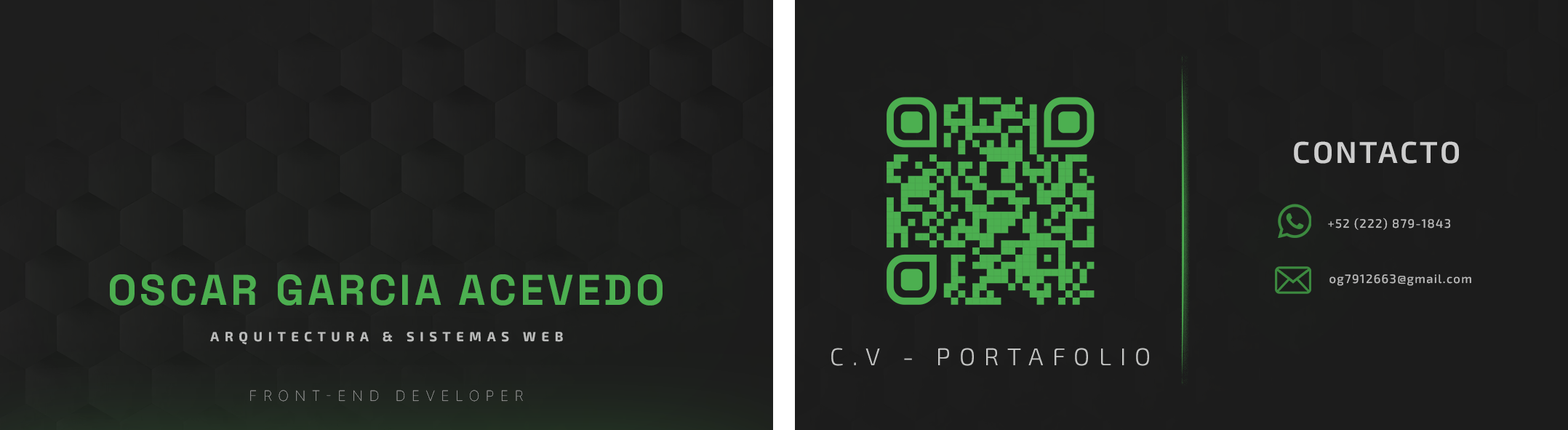
<style>
.page{position:relative;width:1568px;height:430px;background:#1c1c1c}
.page>*{position:absolute;margin:0}
.t1{font:30.3px "Exo2-SemiBold";letter-spacing:0.08em;color:#cdcdcd}
.t2{font:12.1px "Exo2-Medium";letter-spacing:0.08em;color:#bdbdbd}
.t3{font:42.9px "SpaceGrotesk-Bold";letter-spacing:0.08em;color:#4caf50}
.t4{font:13.3px "Exo2-Bold";letter-spacing:0.42em;color:#bdbdbd}
.t5{font:24.2px "Exo2-Light";letter-spacing:0.36em;color:#bcbdbc}
.t6{font:14.3px "Inter-Thin";letter-spacing:0.42em}
</style>
<div class="page">
<p class="t1" style="left:1294px;top:141px;width:165px;height:23px">CONTACTO</p>
<p class="t2" style="left:1328px;top:217px;width:123px;height:13px">+52 (222) 879-1843</p>
<p class="t3" style="left:110px;top:274px;width:553px;height:31px">OSCAR GARCIA ACEVEDO</p>
<p class="t2" style="left:1329px;top:274px;width:142px;height:12px">og7912663@gmail.com</p>
<p class="t4" style="left:210px;top:332px;width:353px;height:13px">ARQUITECTURA &amp; SISTEMAS WEB</p>
<p class="t5" style="left:831px;top:348px;width:318px;height:18px">C.V - PORTAFOLIO</p>
<p class="t6" style="left:250px;top:390px;width:273px;height:11px">FRONT-END DEVELOPER</p>
</div>
